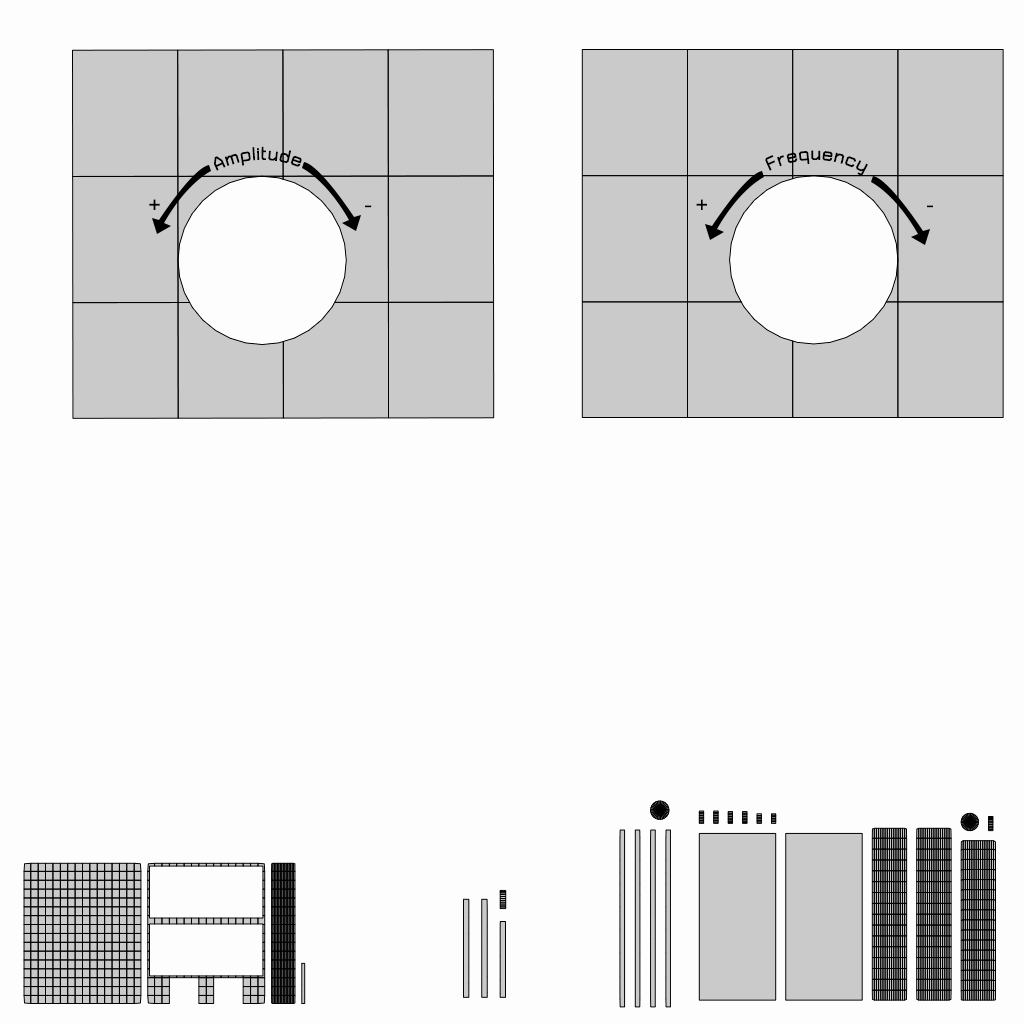
<style>
.page{position:relative;width:1024px;height:1024px;background:#fdfdfd}
.page>*{position:absolute;margin:0}
.t1{font:30px "THChakraPetch-Bold";color:#000000}
</style>
<div class="page">
<p class="t1" style="left:214px;top:146px;width:88px;height:25px;rotate:-26deg">Amplitude</p>
<p class="t1" style="left:765px;top:150px;width:103px;height:26px;rotate:-26deg">Frequency</p>
</div>
